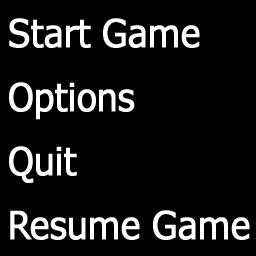
<style>
.page{position:relative;width:256px;height:256px;background:#000000}
.page>*{position:absolute;margin:0}
.t1{font:38.7px/64px "Verdana";letter-spacing:-0.04em;color:#ffffff;font-weight:bold;scale:0.88 1}
</style>
<div class="page">
<p class="t1" style="left:9px;top:18px;width:241px;height:222px">Start Game<br>Options<br>Quit<br>Resume Game</p>
</div>
